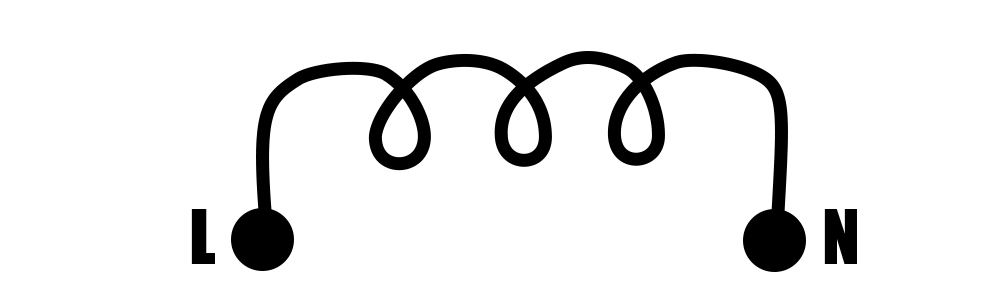
<style>
.page{position:relative;width:1000px;height:300px;background:#ffffff}
.page>*{position:absolute;margin:0}
.t1{font:70px "Impact";color:#000000}
</style>
<div class="page">
<p class="t1" style="left:191px;top:209px;width:24px;height:55px">L</p>
<p class="t1" style="left:824px;top:209px;width:33px;height:55px">N</p>
</div>
